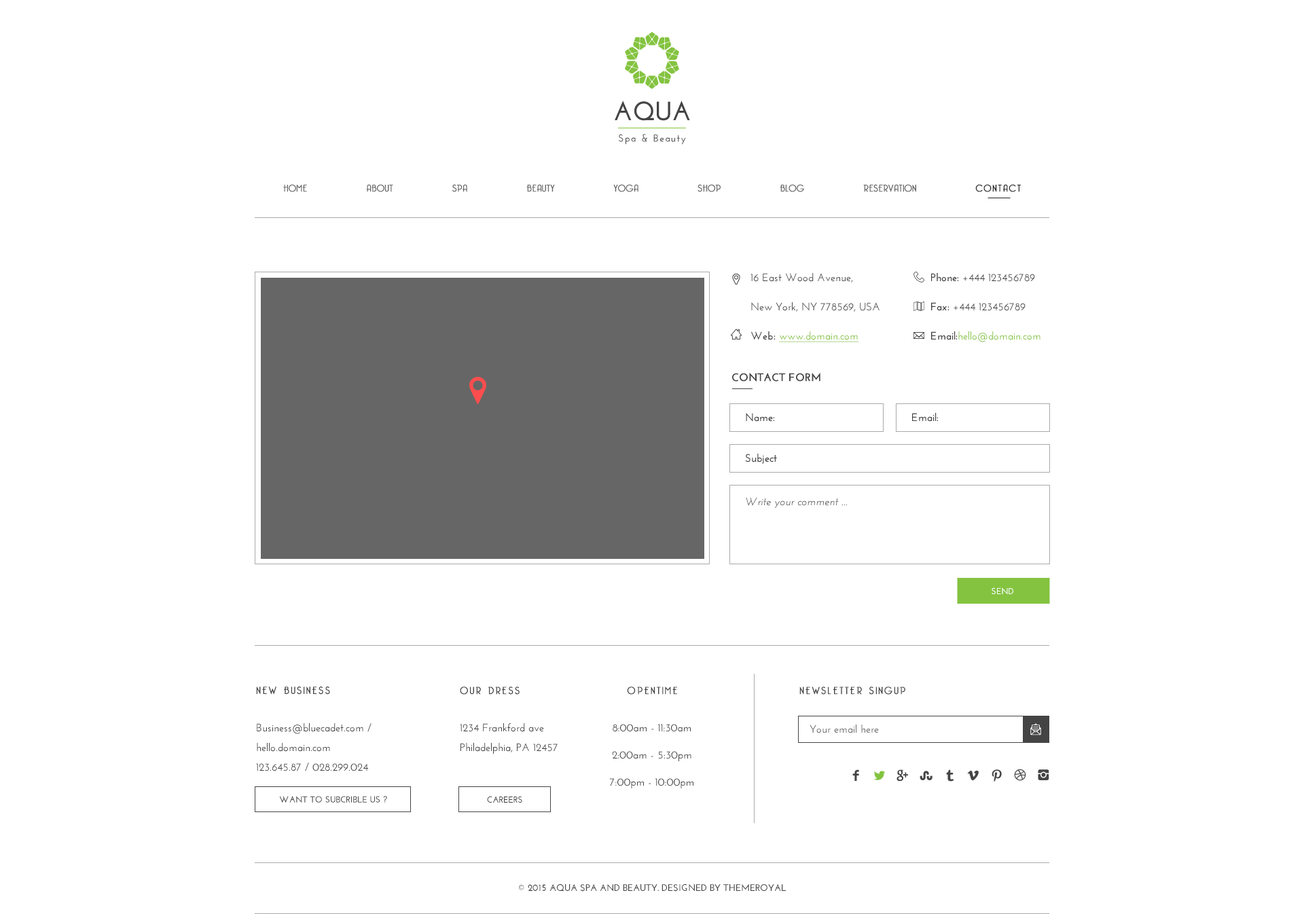
<style>
.page{position:relative;width:1304px;height:914px;background:#ffffff}
.page>*{position:absolute;margin:0}
.t1{font:9.5px "BelleroseLight";letter-spacing:0.02em;color:#666666;font-weight:bold}
.t2{font:9.5px "BelleroseLight";letter-spacing:0.12em;color:#212121;font-weight:bold}
.t3{font:10.9px/29.3px "JosefinSans-SemiBold";color:#444444}
.t4{font:10.9px/29.3px "JosefinSans-Bold";color:#444444}
.t5{font:10.9px/29.3px "JosefinSans-SemiBold";color:#84c33f;text-decoration:underline}
.t6{font:10.9px/29.3px "JosefinSans-SemiBold";color:#84c33f}
.t7{font:10.9px "JosefinSans-Bold";color:#444444;font-weight:bold}
.t8{font:10.9px "JosefinSans-SemiBold";color:#444444}
.t9{font:10.9px "JosefinSans-Italic";color:#666666}
.t10{font:8.8px "JosefinSans-Bold";color:#ffffff}
.t11{font:10.1px "BelleroseLight";letter-spacing:0.15em;color:#444444;font-weight:bold}
.t12{font:10.9px/19.6px "JosefinSans-SemiBold";color:#444444}
.t13{font:10.9px/27.2px "JosefinSans-SemiBold";color:#444444}
.t14{font:10.9px "JosefinSans-SemiBold";color:#666666}
.t15{font:8.8px "JosefinSans-Bold";color:#444444}
.t16{font:9.5px "JosefinSans-Bold";color:#444444}
</style>
<div class="page">
<p class="t1" style="left:283px;top:184px;width:738px;height:8px">HOME          ABOUT          SPA          BEAUTY          YOGA          SHOP          BLOG          RESERVATION          <span class="t2">CONTACT</span></p>
<p class="t3" style="left:751px;top:273px;width:129px;height:69px">16 East Wood Avenue,<br>New York, NY 778569, USA<br><span class="t4">Web: </span><span class="t5">www.domain.com</span></p>
<p class="t6" style="left:931px;top:273px;width:110px;height:69px"><span class="t4">Phone:</span><span class="t3"> +444 123456789<br></span><span class="t4">Fax: </span><span class="t3">+444 123456789<br></span><span class="t4">Email:</span>hello@domain.com</p>
<p class="t7" style="left:732px;top:373px;width:89px;height:9px">CONTACT FORM</p>
<p class="t8" style="left:746px;top:413px;width:29px;height:9px">Name:</p>
<p class="t8" style="left:912px;top:413px;width:27px;height:9px">Email:</p>
<p class="t8" style="left:745px;top:454px;width:32px;height:10px">Subject</p>
<p class="t9" style="left:746px;top:497px;width:101px;height:11px">Write your comment ...</p>
<p class="t10" style="left:992px;top:588px;width:21px;height:7px">SEND</p>
<p class="t11" style="left:256px;top:687px;width:74px;height:8px">NEW BUSINESS</p>
<p class="t11" style="left:460px;top:687px;width:60px;height:8px">OUR DRESS</p>
<p class="t11" style="left:627px;top:687px;width:50px;height:8px">OPENTIME</p>
<p class="t11" style="left:800px;top:687px;width:105px;height:8px">NEWSLETTER SINGUP</p>
<p class="t12" style="left:256px;top:723px;width:116px;height:49px">Business@bluecadet.com / hello.domain.com<br>123.645.87 / 028.299.024</p>
<p class="t12" style="left:460px;top:723px;width:98px;height:31px">1234 Frankford ave <br>Philadelphia, PA 12457</p>
<p class="t13" style="left:609px;top:724px;width:85px;height:65px;text-align:center">8:00am - 11:30am<br>2:00am - 5:30pm<br>7:00pm - 10:00pm</p>
<p class="t14" style="left:810px;top:725px;width:69px;height:9px">Your email here</p>
<p class="t15" style="left:279px;top:796px;width:108px;height:8px">WANT TO SUBCRIBLE US ?</p>
<p class="t15" style="left:487px;top:796px;width:35px;height:7px">CAREERS</p>
<p class="t16" style="left:519px;top:884px;width:268px;height:8px">© 2015 AQUA SPA AND BEAUTY. DESIGNED BY THEMEROYAL</p>
</div>
